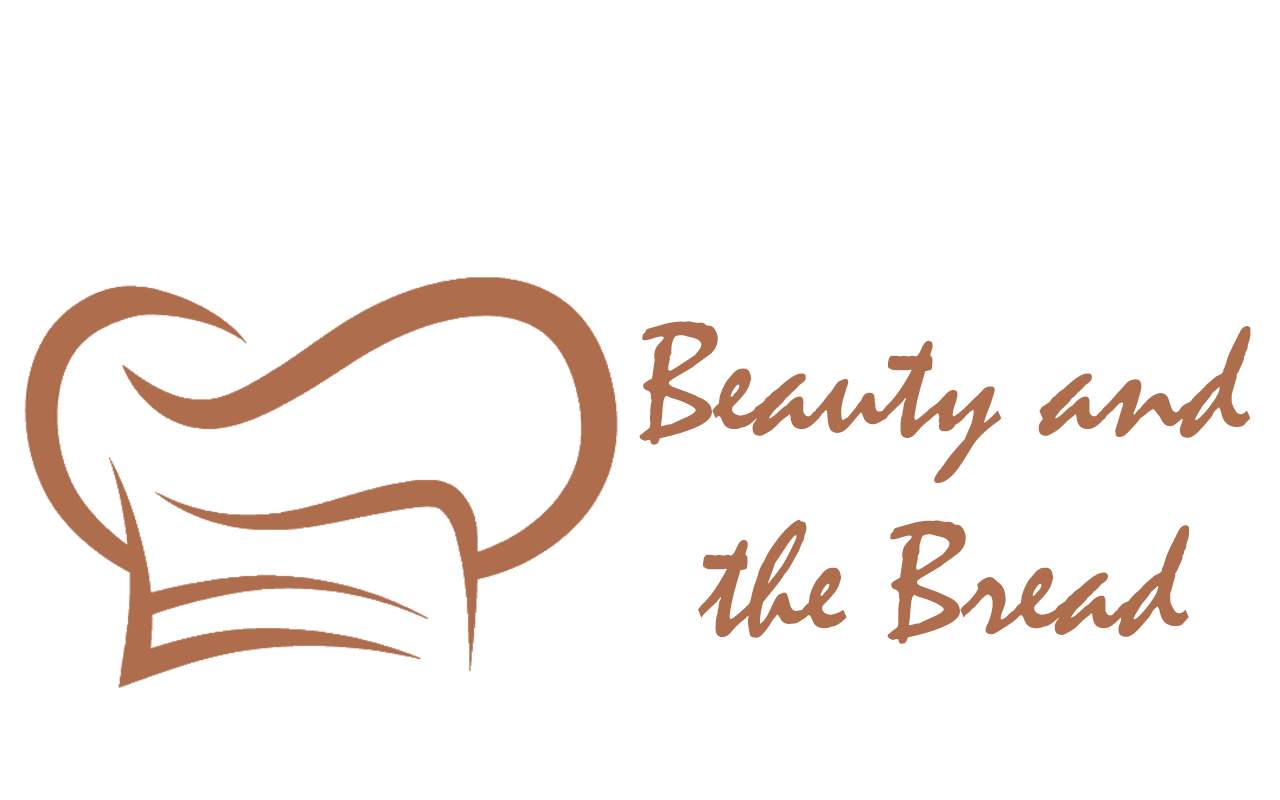
<style>
.page{position:relative;width:1280px;height:800px;background:#ffffff}
.page>*{position:absolute;margin:0}
.t1{font:165.9px "Mistral";color:#ae6e4e}
</style>
<div class="page">
<p class="t1" style="left:639px;top:321px;width:612px;height:323px;text-align:center">Beauty and<br>the Bread</p>
</div>
